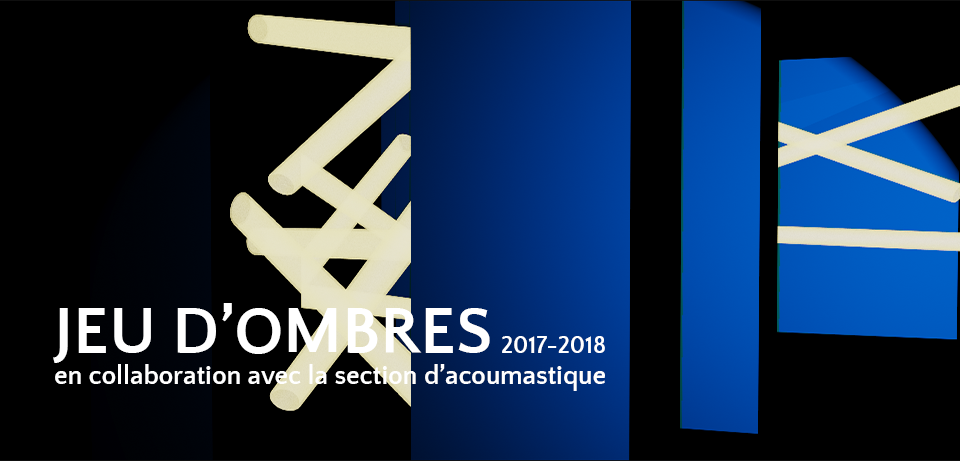
<style>
.page{position:relative;width:960px;height:461px;background:#000000}
.page>*{position:absolute;margin:0}
.t1{font:26.7px "QuattrocentoSans-Bold";color:#ffffff}
.t2{font:66.7px "QuattrocentoSans-Bold";color:#ffffff}
.t3{font:24px "QuattrocentoSans-Bold";color:#ffffff}
</style>
<div class="page">
<p class="t1" style="left:53px;top:303px;width:552px;height:88px"><span class="t2">JEU D’OMBRES <br></span>en collaboration avec la section d’acoumastique</p>
<p class="t3" style="left:502px;top:336px;width:103px;height:17px">2017-2018</p>
</div>
